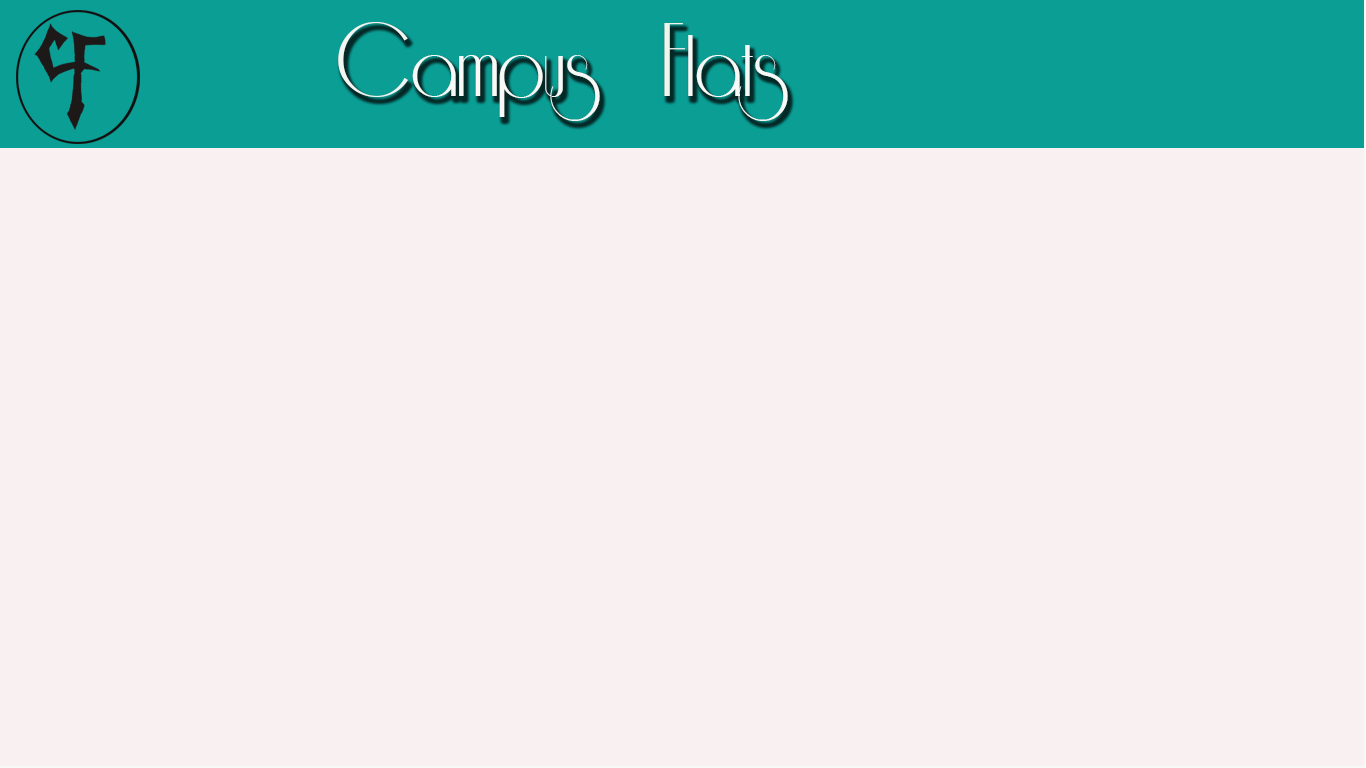
<style>
.page{position:relative;width:1366px;height:768px;background:#f9f1f1}
.page>*{position:absolute;margin:0}
.t1{font:100px "Riesling";color:#f6f9f5}
.t2{font:120px "Riesling";color:#f2f6f2}
.t3{font:120px "Riesling";color:#eef6ec}
</style>
<div class="page">
<p class="t1" style="left:338px;top:22px;width:450px;height:99px"><span class="t2">C</span>ampus  <span class="t3">F</span>lats</p>
</div>
